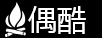
<style>
.page{position:relative;width:102px;height:38px;background:#000000}
.page>*{position:absolute;margin:0}
.t1{font:28.9px "MicrosoftYaHei";color:#ffffff}
</style>
<div class="page">
<p class="t1" style="left:28px;top:6px;width:58px;height:28px">偶酷</p>
</div>
